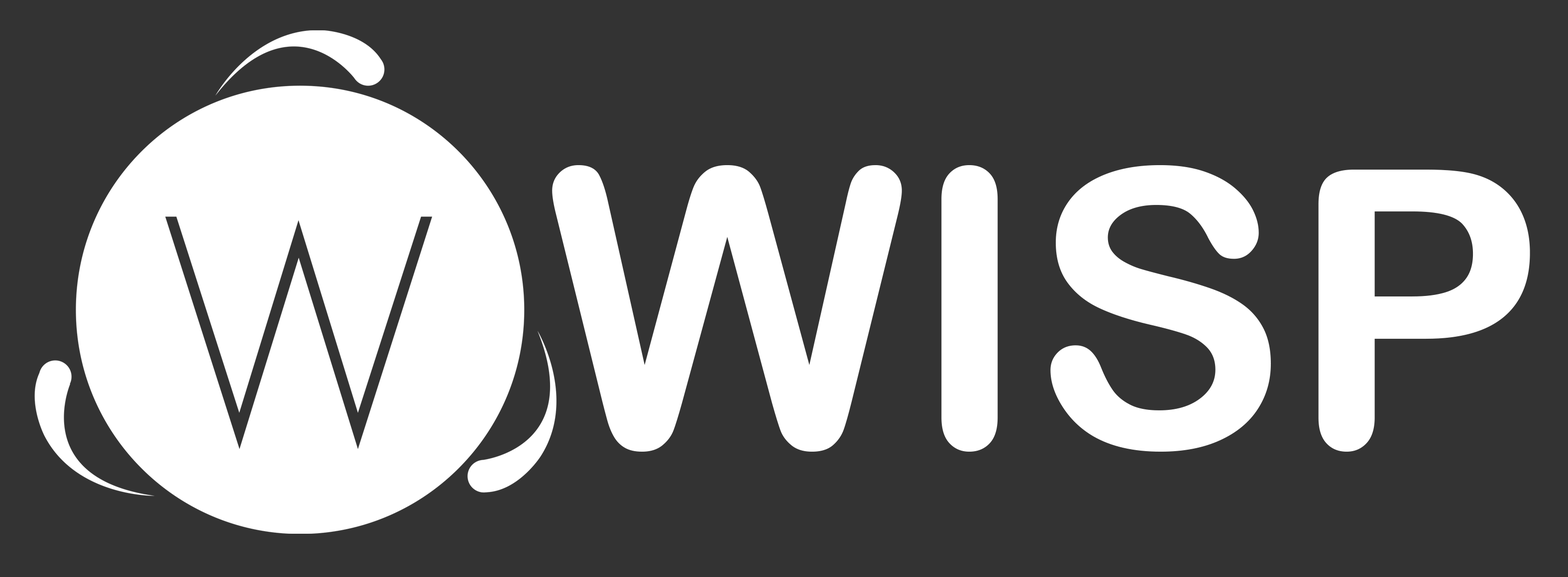
<style>
.page{position:relative;width:1568px;height:577px;background:#333333}
.page>*{position:absolute;margin:0}
.t1{font:387.2px "ArialRoundedMTBold";color:#ffffff}
</style>
<div class="page">
<p class="t1" style="left:552px;top:165px;width:978px;height:287px">WISP</p>
</div>
